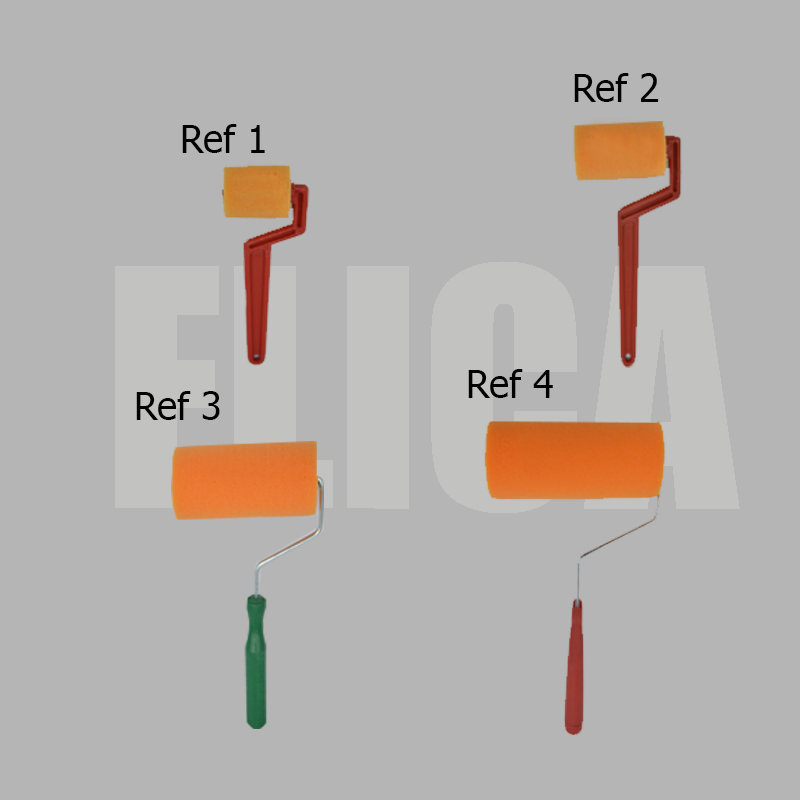
<style>
.page{position:relative;width:800px;height:800px;background:#b5b5b5}
.page>*{position:absolute;margin:0}
.t1{font:38px "Tahoma";color:#020202}
</style>
<div class="page">
<p class="t1" style="left:574px;top:73px;width:85px;height:29px">Ref 2</p>
<p class="t1" style="left:182px;top:124px;width:83px;height:29px">Ref 1</p>
<p class="t1" style="left:468px;top:369px;width:85px;height:29px">Ref 4</p>
<p class="t1" style="left:136px;top:391px;width:84px;height:29px">Ref 3</p>
</div>
